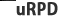
<style>
.page{position:relative;width:59px;height:16px;background:#ffffff}
.page>*{position:absolute;margin:0}
.t1{font:16px "AdobeGothicStd-Bold";color:#303030;font-weight:bold}
</style>
<div class="page">
<p class="t1" style="left:16px;top:2px;width:42px;height:14px">uRPD</p>
</div>
